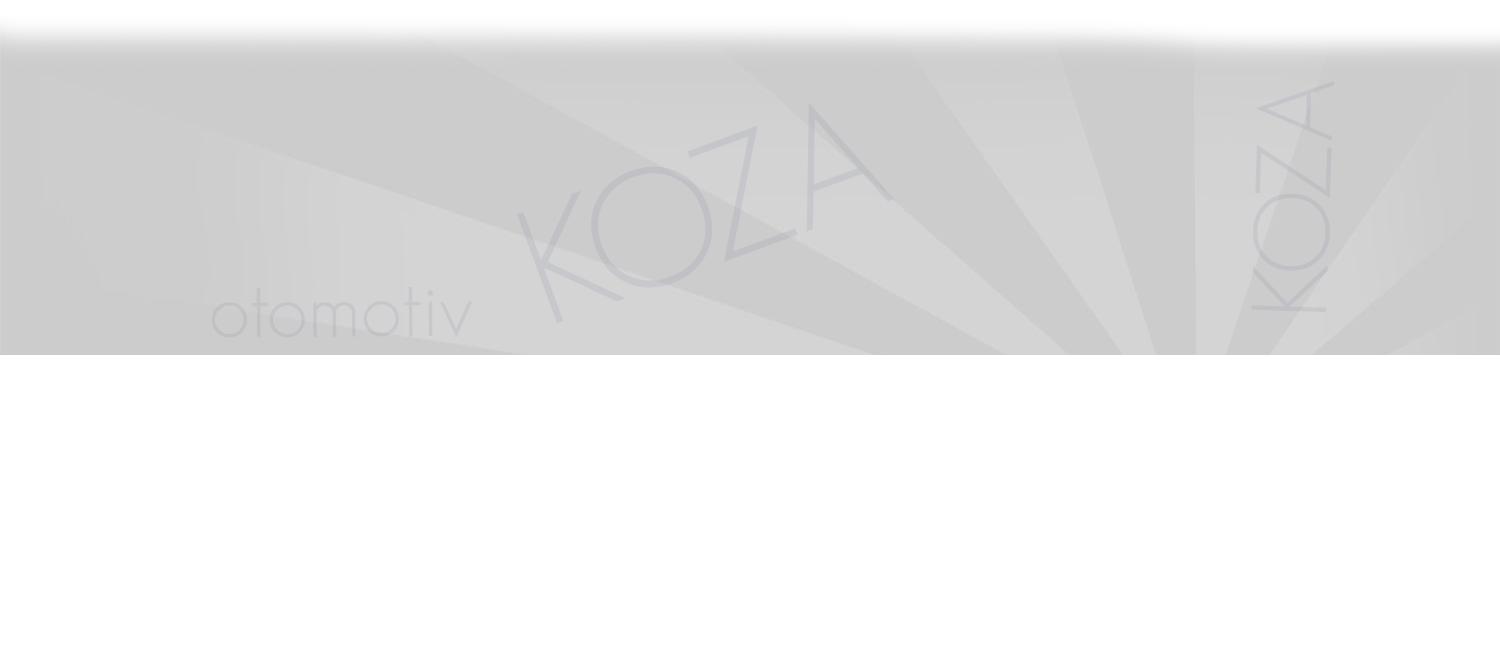
<style>
.page{position:relative;width:1500px;height:650px;background:#ffffff}
.page>*{position:absolute;margin:0}
.t1{font:104.6px "GeosansLight";color:#bfc1c5}
.t2{font:162.7px "GeosansLight";color:#c1c3c7}
.t3{font:82.6px "GeosansLight";color:#c5c6ca}
</style>
<div class="page">
<p class="t1" style="left:1251px;top:81px;width:83px;height:232px;rotate:-88deg">KOZA</p>
<p class="t2" style="left:516px;top:102px;width:378px;height:222px;rotate:-20deg">KOZA</p>
<p class="t3" style="left:211px;top:287px;width:261px;height:51px">otomotiv</p>
</div>
